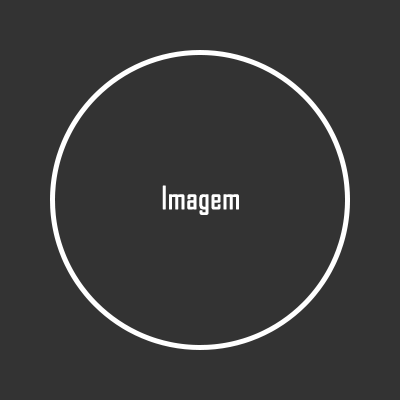
<style>
.page{position:relative;width:400px;height:400px;background:#333333}
.page>*{position:absolute;margin:0}
.t1{font:30px "AgencyFB-Reg";color:#ffffff;font-weight:bold}
</style>
<div class="page">
<p class="t1" style="left:162px;top:185px;width:77px;height:30px">Imagem</p>
</div>
